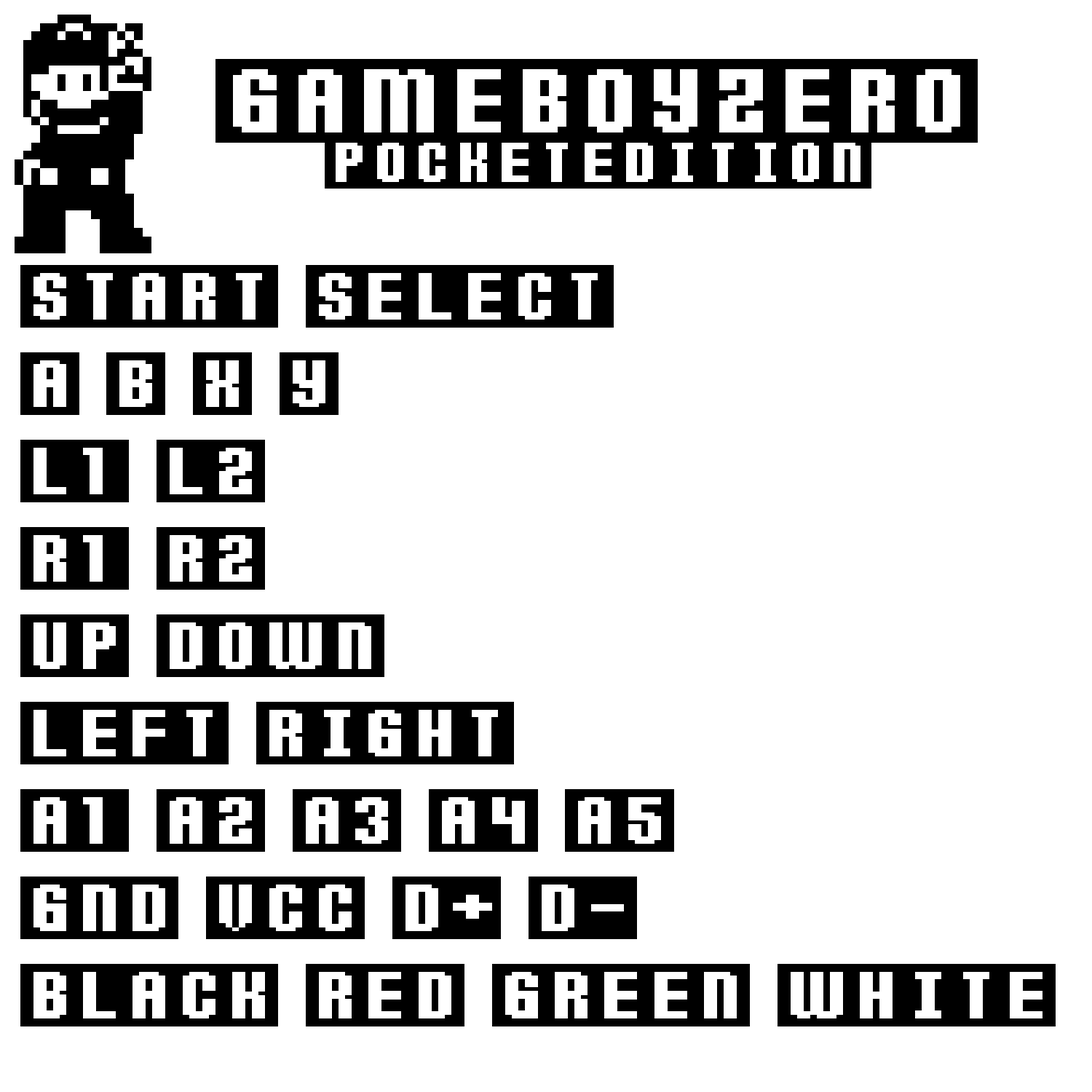
<style>
.page{position:relative;width:1092px;height:1092px;background:#ffffff}
.page>*{position:absolute;margin:0}
.t1{font:52.4px/52.4px "Anticlimax";letter-spacing:-0.15em;color:#000000;scale:1.67 1}
.t2{font:83.9px/52.4px "Anticlimax";letter-spacing:-0.15em;color:#000000;scale:1.67 1}
.t3{font:62.9px/87.4px "Anticlimax";letter-spacing:-0.15em;color:#000000;scale:1.67 1}
</style>
<div class="page">
<p class="t1" style="left:215px;top:59px;width:763px;height:130px;text-align:center"><span class="t2">gameboyzero<br></span>pocketedition</p>
<p class="t3" style="left:20px;top:265px;width:1036px;height:761px">start select<br>a b x y<br>l1 l2<br>r1 r2<br>up down<br>left right<br>a1 a2 a3 a4 a5<br>gnd vcc d+ d-<br>black red green white</p>
</div>
